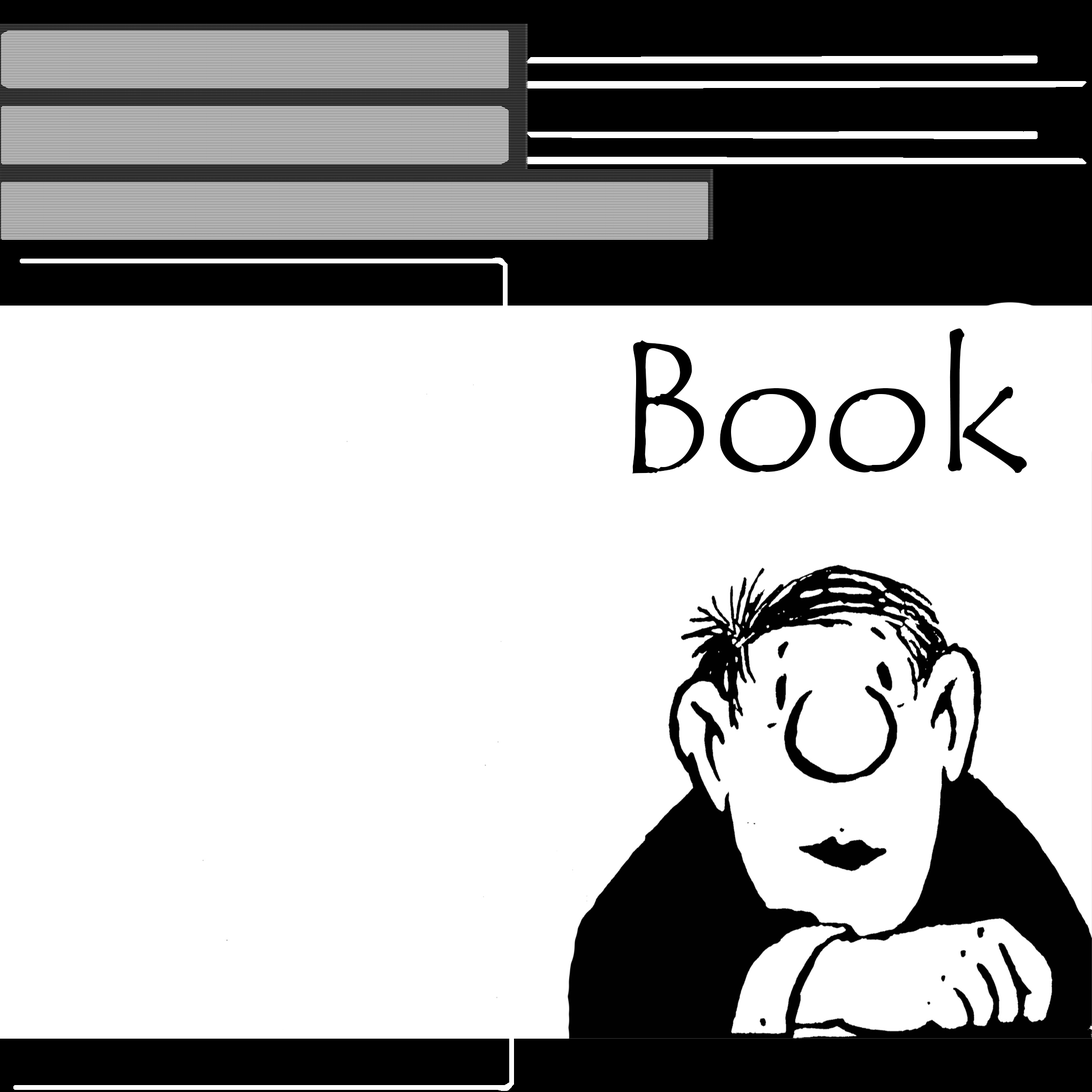
<style>
.page{position:relative;width:1092px;height:1092px;background:#ffffff}
.page>*{position:absolute;margin:0}
.t1{font:186.6px "TempusSansITC";color:#000000}
</style>
<div class="page">
<p class="t1" style="left:632px;top:328px;width:395px;height:145px">Book</p>
</div>
